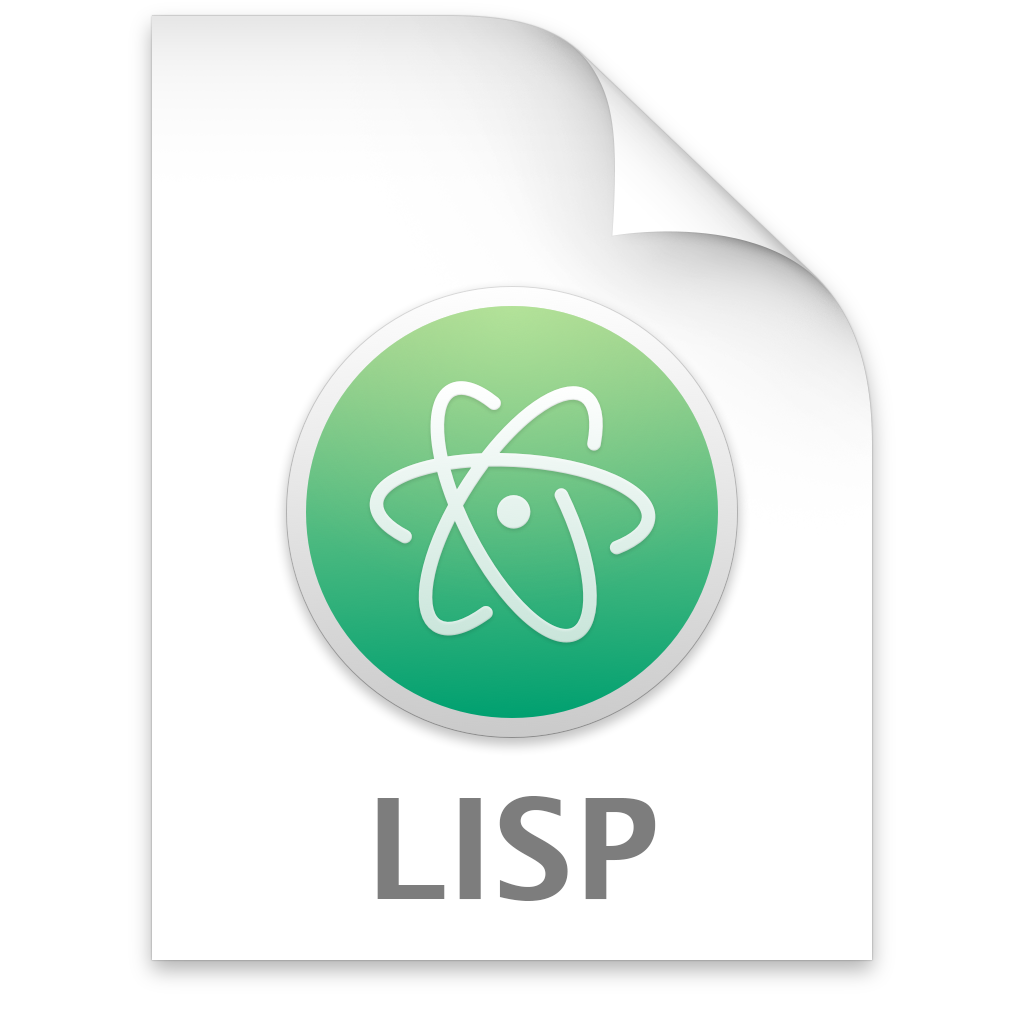
<style>
.page{position:relative;width:1024px;height:1024px;background:#ffffff}
.page>*{position:absolute;margin:0}
.t1{font:140px "LucidaGrande-Bold";color:#7d7d7d}
</style>
<div class="page">
<p class="t1" style="left:377px;top:796px;width:279px;height:105px">LISP</p>
</div>
